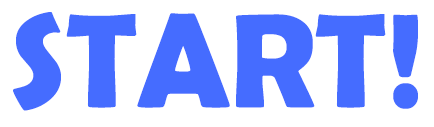
<style>
.page{position:relative;width:434px;height:127px;background:#ffffff}
.page>*{position:absolute;margin:0}
.t1{font:134.4px "BerlinSansFBDemi-Bold";color:#456cff}
</style>
<div class="page">
<p class="t1" style="left:13px;top:12px;width:405px;height:99px">START!</p>
</div>
